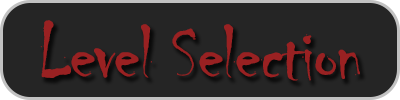
<style>
.page{position:relative;width:400px;height:100px;background:#252525}
.page>*{position:absolute;margin:0}
.t1{font:80px "Chiller-Regular";letter-spacing:-0.025em;color:#992122}
</style>
<div class="page">
<p class="t1" style="left:40px;top:20px;width:320px;height:61px">Level Selection</p>
</div>
